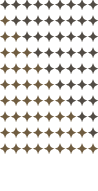
<style>
.page{position:relative;width:98px;height:191px;background:#ffffff}
.page>*{position:absolute;margin:0}
.t1{font:48px "BlackAngels";letter-spacing:0.3em;color:#524c45}
.t2{font:48px "BlackAngels";letter-spacing:0.3em;color:#705d41}
</style>
<div class="page">
<p class="t1" style="left:0px;top:0px;width:11px;height:10px">.</p>
<p class="t1" style="left:11px;top:0px;width:11px;height:10px">.</p>
<p class="t1" style="left:22px;top:0px;width:11px;height:10px">.</p>
<p class="t1" style="left:33px;top:0px;width:11px;height:10px">.</p>
<p class="t1" style="left:44px;top:0px;width:11px;height:10px">.</p>
<p class="t1" style="left:55px;top:0px;width:11px;height:10px">.</p>
<p class="t1" style="left:66px;top:0px;width:11px;height:10px">.</p>
<p class="t1" style="left:77px;top:0px;width:11px;height:10px">.</p>
<p class="t1" style="left:88px;top:0px;width:10px;height:10px">.</p>
<p class="t2" style="left:0px;top:15px;width:11px;height:11px">.</p>
<p class="t1" style="left:11px;top:15px;width:11px;height:11px">.</p>
<p class="t1" style="left:22px;top:15px;width:11px;height:11px">.</p>
<p class="t1" style="left:33px;top:15px;width:11px;height:11px">.</p>
<p class="t1" style="left:44px;top:15px;width:11px;height:11px">.</p>
<p class="t1" style="left:55px;top:15px;width:11px;height:11px">.</p>
<p class="t1" style="left:66px;top:15px;width:11px;height:11px">.</p>
<p class="t1" style="left:77px;top:15px;width:11px;height:11px">.</p>
<p class="t1" style="left:88px;top:15px;width:10px;height:11px">.</p>
<p class="t2" style="left:0px;top:31px;width:11px;height:11px">.</p>
<p class="t2" style="left:11px;top:31px;width:11px;height:11px">.</p>
<p class="t1" style="left:22px;top:31px;width:11px;height:11px">.</p>
<p class="t1" style="left:33px;top:31px;width:11px;height:11px">.</p>
<p class="t1" style="left:44px;top:31px;width:11px;height:11px">.</p>
<p class="t1" style="left:55px;top:31px;width:11px;height:11px">.</p>
<p class="t1" style="left:66px;top:31px;width:11px;height:11px">.</p>
<p class="t1" style="left:77px;top:31px;width:11px;height:11px">.</p>
<p class="t1" style="left:88px;top:31px;width:10px;height:11px">.</p>
<p class="t2" style="left:0px;top:47px;width:11px;height:11px">.</p>
<p class="t2" style="left:11px;top:47px;width:11px;height:11px">.</p>
<p class="t2" style="left:22px;top:47px;width:11px;height:11px">.</p>
<p class="t1" style="left:33px;top:47px;width:11px;height:11px">.</p>
<p class="t1" style="left:44px;top:47px;width:11px;height:11px">.</p>
<p class="t1" style="left:55px;top:47px;width:11px;height:11px">.</p>
<p class="t1" style="left:66px;top:47px;width:11px;height:11px">.</p>
<p class="t1" style="left:77px;top:47px;width:11px;height:11px">.</p>
<p class="t1" style="left:88px;top:47px;width:10px;height:11px">.</p>
<p class="t2" style="left:0px;top:63px;width:11px;height:11px">.</p>
<p class="t2" style="left:11px;top:63px;width:11px;height:11px">.</p>
<p class="t2" style="left:22px;top:63px;width:11px;height:11px">.</p>
<p class="t2" style="left:33px;top:63px;width:11px;height:11px">.</p>
<p class="t1" style="left:44px;top:63px;width:11px;height:11px">.</p>
<p class="t1" style="left:55px;top:63px;width:11px;height:11px">.</p>
<p class="t1" style="left:66px;top:63px;width:11px;height:11px">.</p>
<p class="t1" style="left:77px;top:63px;width:11px;height:11px">.</p>
<p class="t1" style="left:88px;top:63px;width:10px;height:11px">.</p>
<p class="t2" style="left:0px;top:79px;width:11px;height:11px">.</p>
<p class="t2" style="left:11px;top:79px;width:11px;height:11px">.</p>
<p class="t2" style="left:22px;top:79px;width:11px;height:11px">.</p>
<p class="t2" style="left:33px;top:79px;width:11px;height:11px">.</p>
<p class="t2" style="left:44px;top:79px;width:11px;height:11px">.</p>
<p class="t1" style="left:55px;top:79px;width:11px;height:11px">.</p>
<p class="t1" style="left:66px;top:79px;width:11px;height:11px">.</p>
<p class="t1" style="left:77px;top:79px;width:11px;height:11px">.</p>
<p class="t1" style="left:88px;top:79px;width:10px;height:11px">.</p>
<p class="t2" style="left:0px;top:95px;width:11px;height:11px">.</p>
<p class="t2" style="left:11px;top:95px;width:11px;height:11px">.</p>
<p class="t2" style="left:22px;top:95px;width:11px;height:11px">.</p>
<p class="t2" style="left:33px;top:95px;width:11px;height:11px">.</p>
<p class="t2" style="left:44px;top:95px;width:11px;height:11px">.</p>
<p class="t2" style="left:55px;top:95px;width:11px;height:11px">.</p>
<p class="t1" style="left:66px;top:95px;width:11px;height:11px">.</p>
<p class="t1" style="left:77px;top:95px;width:11px;height:11px">.</p>
<p class="t1" style="left:88px;top:95px;width:10px;height:11px">.</p>
<p class="t2" style="left:0px;top:111px;width:11px;height:11px">.</p>
<p class="t2" style="left:11px;top:111px;width:11px;height:11px">.</p>
<p class="t2" style="left:22px;top:111px;width:11px;height:11px">.</p>
<p class="t2" style="left:33px;top:111px;width:11px;height:11px">.</p>
<p class="t2" style="left:44px;top:111px;width:11px;height:11px">.</p>
<p class="t2" style="left:55px;top:111px;width:11px;height:11px">.</p>
<p class="t2" style="left:66px;top:111px;width:11px;height:11px">.</p>
<p class="t1" style="left:77px;top:111px;width:11px;height:11px">.</p>
<p class="t1" style="left:88px;top:111px;width:10px;height:11px">.</p>
<p class="t2" style="left:0px;top:127px;width:11px;height:11px">.</p>
<p class="t2" style="left:11px;top:127px;width:11px;height:11px">.</p>
<p class="t2" style="left:22px;top:127px;width:11px;height:11px">.</p>
<p class="t2" style="left:33px;top:127px;width:11px;height:11px">.</p>
<p class="t2" style="left:44px;top:127px;width:11px;height:11px">.</p>
<p class="t2" style="left:55px;top:127px;width:11px;height:11px">.</p>
<p class="t2" style="left:66px;top:127px;width:11px;height:11px">.</p>
<p class="t2" style="left:77px;top:127px;width:11px;height:11px">.</p>
<p class="t1" style="left:88px;top:127px;width:10px;height:11px">.</p>
<p class="t2" style="left:0px;top:143px;width:11px;height:11px">.</p>
<p class="t2" style="left:11px;top:143px;width:11px;height:11px">.</p>
<p class="t2" style="left:22px;top:143px;width:11px;height:11px">.</p>
<p class="t2" style="left:33px;top:143px;width:11px;height:11px">.</p>
<p class="t2" style="left:44px;top:143px;width:11px;height:11px">.</p>
<p class="t2" style="left:55px;top:143px;width:11px;height:11px">.</p>
<p class="t2" style="left:66px;top:143px;width:11px;height:11px">.</p>
<p class="t2" style="left:77px;top:143px;width:11px;height:11px">.</p>
<p class="t2" style="left:88px;top:143px;width:10px;height:11px">.</p>
</div>
